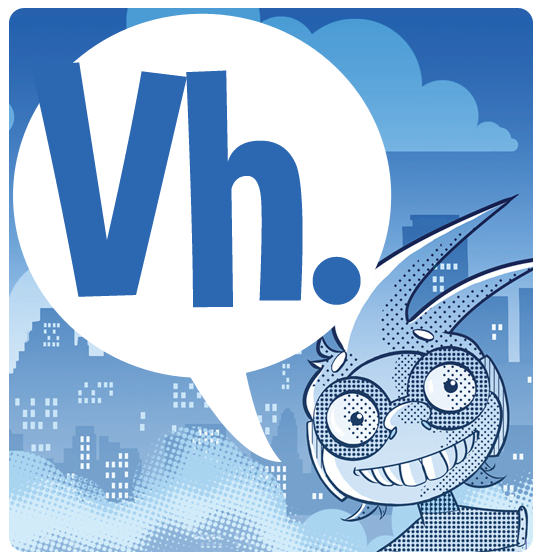
<style>
.page{position:relative;width:537px;height:559px;background:#ffffff}
.page>*{position:absolute;margin:0}
.t1{font:333.3px "DimboRegular";letter-spacing:-0.01em;color:#2c68b1}
</style>
<div class="page">
<p class="t1" style="left:31px;top:62px;width:330px;height:246px">Vh.</p>
</div>
